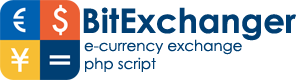
<style>
.page{position:relative;width:300px;height:80px;background:#ffffff}
.page>*{position:absolute;margin:0}
.t1{font:34px "CenturyGothic-Bold";color:#003f73}
.t2{font:15px "CenturyGothic";color:#003f73}
</style>
<div class="page">
<p class="t1" style="left:83px;top:7px;width:213px;height:34px">BitExchanger</p>
<p class="t2" style="left:84px;top:39px;width:158px;height:33px">e-currency exchange<br>php script</p>
</div>
